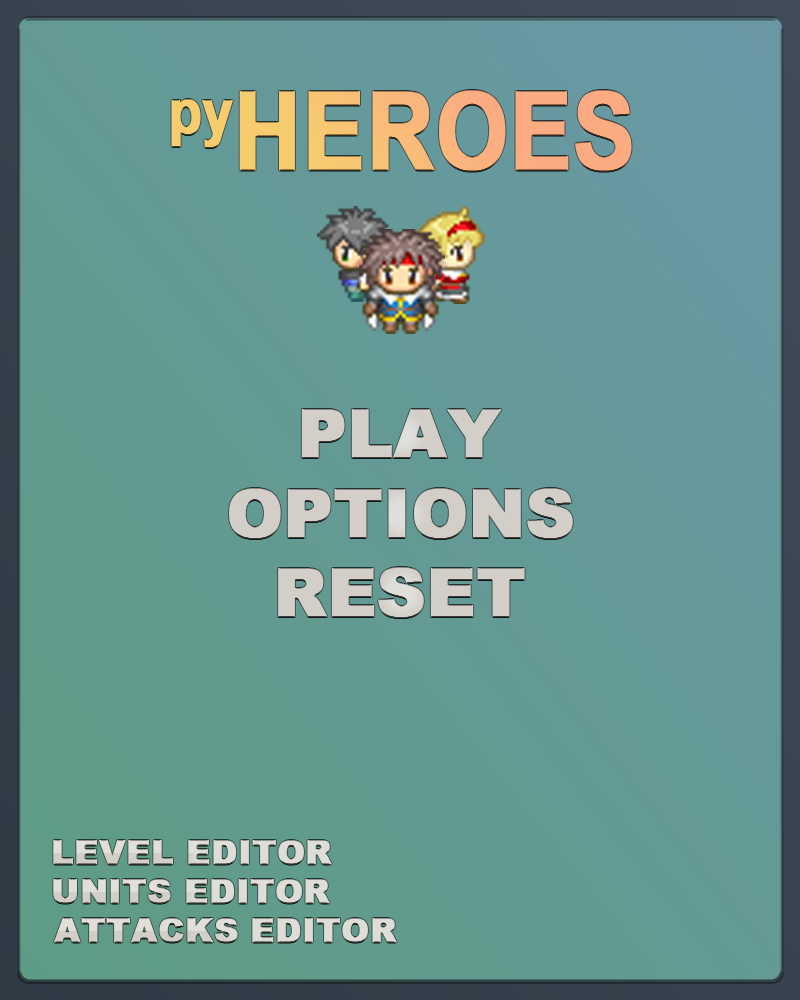
<style>
.page{position:relative;width:800px;height:1000px}
.page>*{position:absolute;margin:0}
.t1{font:108.1px "Arial-BoldMT";color:#f9b679;font-weight:bold;scale:0.85 1}
.t2{font:66.6px "Arial-Black";color:#d3cfc8;font-weight:bold}
.t3{font:33.3px "Arial-Black";color:#deddd8;font-weight:bold}
</style>
<div class="page">
<p class="t1" style="left:171px;top:90px;width:461px;height:82px">pyHEROES</p>
<p class="t2" style="left:301px;top:409px;width:200px;height:49px">PLAY</p>
<p class="t2" style="left:229px;top:488px;width:344px;height:51px">OPTIONS</p>
<p class="t2" style="left:278px;top:567px;width:247px;height:51px">RESET</p>
<p class="t3" style="left:53px;top:840px;width:279px;height:25px">LEVEL EDITOR</p>
<p class="t3" style="left:53px;top:879px;width:277px;height:25px">UNITS EDITOR</p>
<p class="t3" style="left:54px;top:918px;width:343px;height:25px">ATTACKS EDITOR</p>
</div>
